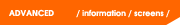
<style>
.page{position:relative;width:180px;height:25px;background:#ff6600}
.page>*{position:absolute;margin:0}
.t1{font:8px "Atlanta-Demi";color:#ffffff}
</style>
<div class="page">
<p class="t1" style="left:9px;top:9px;width:45px;height:8px">ADVANCED</p>
<p class="t1" style="left:76px;top:9px;width:94px;height:9px">/ information / screens /</p>
</div>
